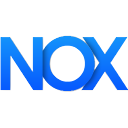
<style>
.page{position:relative;width:128px;height:128px;background:#ffffff}
.page>*{position:absolute;margin:0}
.t1{font:74px "CenturyGothic-Bold";letter-spacing:-0.1em;color:#0d76fc}
.t2{font:74px "CenturyGothic-Bold";letter-spacing:-0.1em}
</style>
<div class="page">
<p class="t1" style="left:0px;top:37px;width:43px;height:53px">N</p>
<p class="t2" style="left:39px;top:36px;width:56px;height:55px">O</p>
<p class="t2" style="left:81px;top:37px;width:48px;height:53px">X</p>
</div>
